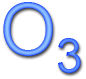
<style>
.page{position:relative;width:86px;height:79px;background:#ffffff}
.page>*{position:absolute;margin:0}
.t1{font:72px "ArialMT"}
.t2{font:48px "ArialMT"}
</style>
<div class="page">
<p class="t1" style="left:3px;top:2px;width:78px;height:71px">O<span class="t2">3</span></p>
</div>
